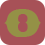
<style>
.page{position:relative;width:45px;height:45px;background:#a75157}
.page>*{position:absolute;margin:0}
.t1{font:50px "Saddlebag-Black";color:#949146}
</style>
<div class="page">
<p class="t1" style="left:4px;top:9px;width:37px;height:28px">O</p>
</div>
